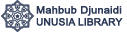
<style>
.page{position:relative;width:127px;height:32px;background:#ffffff}
.page>*{position:absolute;margin:0}
.t1{font:10px "ArialMT";color:#2b3855;font-weight:bold;scale:1.08 1}
.t2{font:10px "ArialMT";color:#2b3855;font-weight:bold}
</style>
<div class="page">
<p class="t1" style="left:36px;top:6px;width:86px;height:10px">Mahbub Djunaidi</p>
<p class="t2" style="left:36px;top:18px;width:87px;height:8px">UNUSIA LIBRARY</p>
</div>
